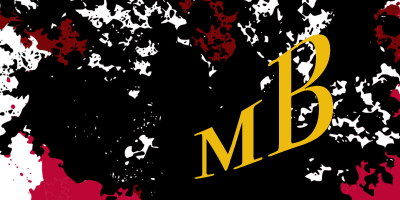
<style>
.page{position:relative;width:400px;height:200px;background:#000000}
.page>*{position:absolute;margin:0}
.t1{font:130px "BodoniSvtyTwoSCITCTT-Book";color:#edbb0e}
</style>
<div class="page">
<p class="t1" style="left:194px;top:34px;width:140px;height:145px">mB</p>
</div>
